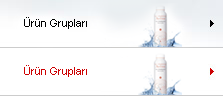
<style>
.page{position:relative;width:223px;height:96px;background:#ffffff}
.page>*{position:absolute;margin:0}
.t1{font:11px "ArialMT";color:#000000}
.t2{font:11px "ArialMT";color:#cd0102}
</style>
<div class="page">
<p class="t1" style="left:24px;top:17px;width:63px;height:12px">Ürün Grupları</p>
<p class="t2" style="left:24px;top:65px;width:63px;height:12px">Ürün Grupları</p>
</div>
